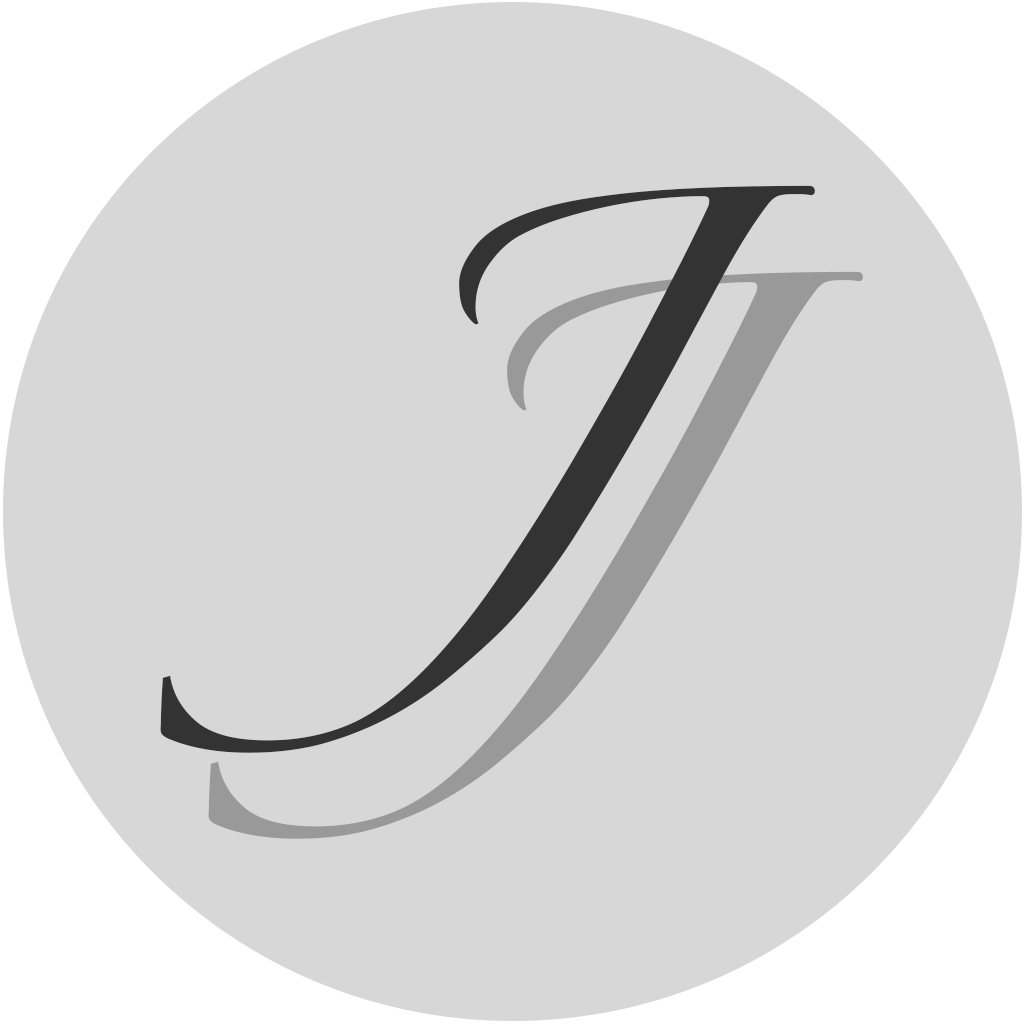
<style>
.page{position:relative;width:1024px;height:1024px;background:#d7d7d7}
.page>*{position:absolute;margin:0}
.t1{font:410px "Zapfino";color:#333333;text-transform:uppercase}
.t2{font:410px "Zapfino";color:#999999;text-transform:uppercase}
</style>
<div class="page">
<p class="t1" style="left:160px;top:185px;width:655px;height:568px">J</p>
<p class="t2" style="left:208px;top:271px;width:655px;height:568px">J</p>
</div>
